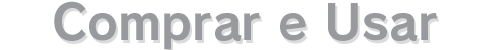
<style>
.page{position:relative;width:490px;height:50px;background:#ffffff}
.page>*{position:absolute;margin:0}
.t1{font:48px "RodinPro-B";color:#989a9d}
</style>
<div class="page">
<p class="t1" style="left:54px;top:1px;width:383px;height:49px">Comprar e Usar</p>
</div>
